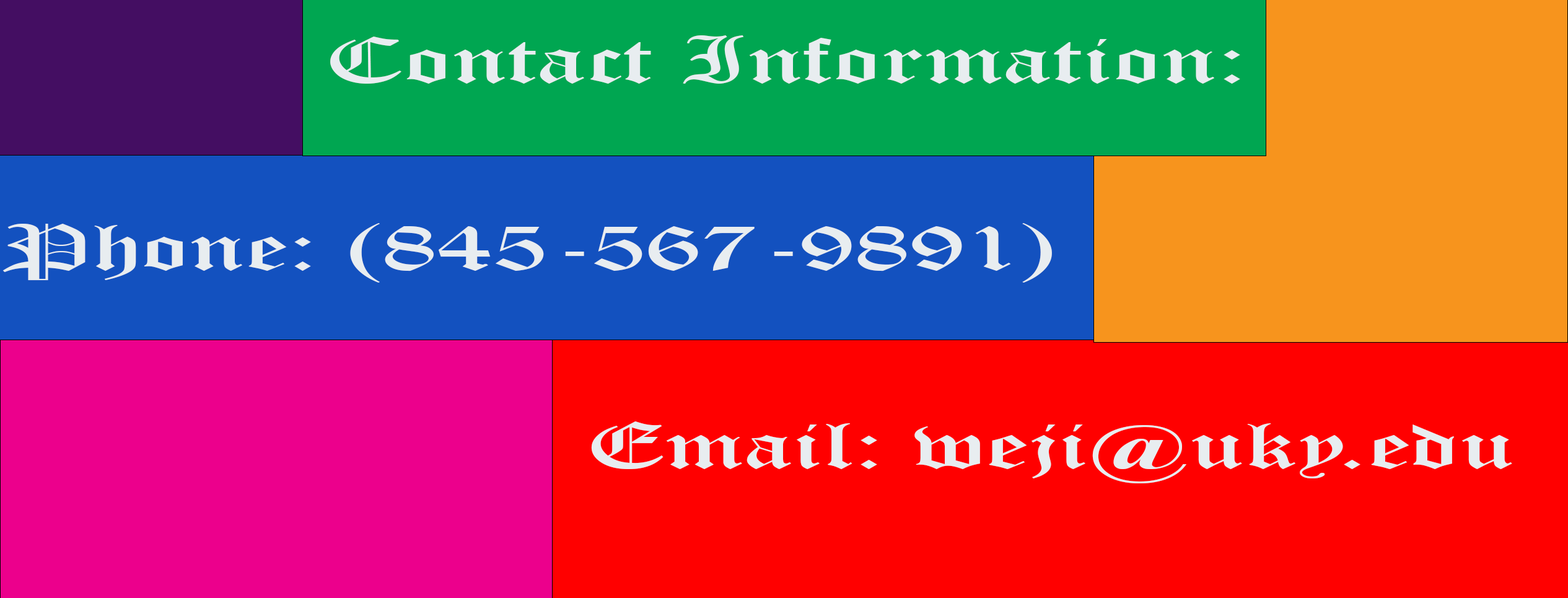
<style>
.page{position:relative;width:1568px;height:598px;background:#ff0000}
.page>*{position:absolute;margin:0}
.t1{font:65px "OldEnglishTextMT";color:#e8edf0;scale:1.67 1}
</style>
<div class="page">
<p class="t1" style="left:330px;top:35px;width:910px;height:49px">Contact Information:</p>
<p class="t1" style="left:2px;top:223px;width:1050px;height:60px">Phone: (845-567-9891)</p>
<p class="t1" style="left:591px;top:421px;width:921px;height:62px">Email: weji@uky.edu</p>
</div>
